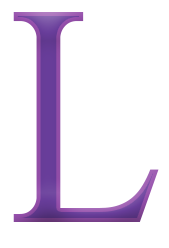
<style>
.page{position:relative;width:169px;height:248px;background:#ffffff}
.page>*{position:absolute;margin:0}
.t1{font:300px "Constantine"}
</style>
<div class="page">
<p class="t1" style="left:13px;top:12px;width:146px;height:210px">L</p>
</div>
